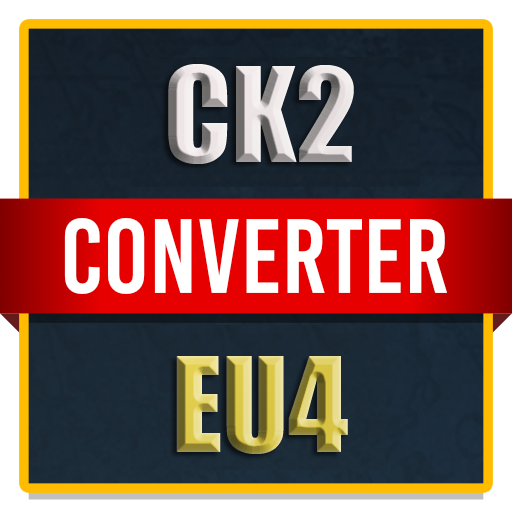
<style>
.page{position:relative;width:512px;height:512px}
.page>*{position:absolute;margin:0}
.t1{font:120.8px "Impact"}
</style>
<div class="page">
<p class="t1" style="left:168px;top:64px;width:186px;height:390px;text-align:center">CK2<br><br>EU4</p>
</div>
